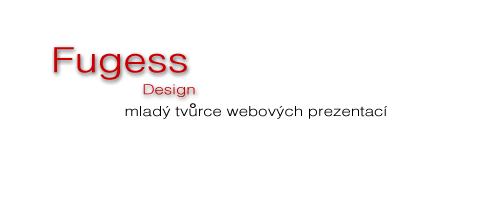
<style>
.page{position:relative;width:500px;height:200px;background:#ffffff}
.page>*{position:absolute;margin:0}
.t1{font:35px "HelvLight-Normal";color:#cc0000;scale:1.2 1}
.t2{font:14px "HelvLight-Normal";color:#cc0000;scale:1.2 1}
.t3{font:14px "HelvLight-Normal";color:#000000;scale:1.2 1}
</style>
<div class="page">
<p class="t1" style="left:54px;top:47px;width:133px;height:33px">Fugess</p>
<p class="t2" style="left:143px;top:84px;width:52px;height:13px">Design</p>
<p class="t3" style="left:125px;top:106px;width:262px;height:13px">mladý tvurce webových prezentací</p>
</div>
